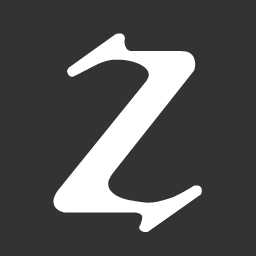
<style>
.page{position:relative;width:256px;height:256px;background:#333333}
.page>*{position:absolute;margin:0}
.t1{font:219.6px "VNI-Duff";color:#ffffff}
</style>
<div class="page">
<p class="t1" style="left:53px;top:33px;width:149px;height:199px">Z</p>
</div>
